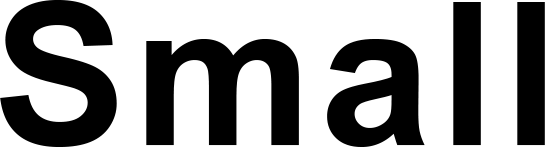
<style>
.page{position:relative;width:545px;height:147px;background:#ffffff}
.page>*{position:absolute;margin:0}
.t1{font:200px "Arial-BoldMT";letter-spacing:0.04em;color:#000000}
</style>
<div class="page">
<p class="t1" style="left:0px;top:0px;width:545px;height:147px">Small</p>
</div>
